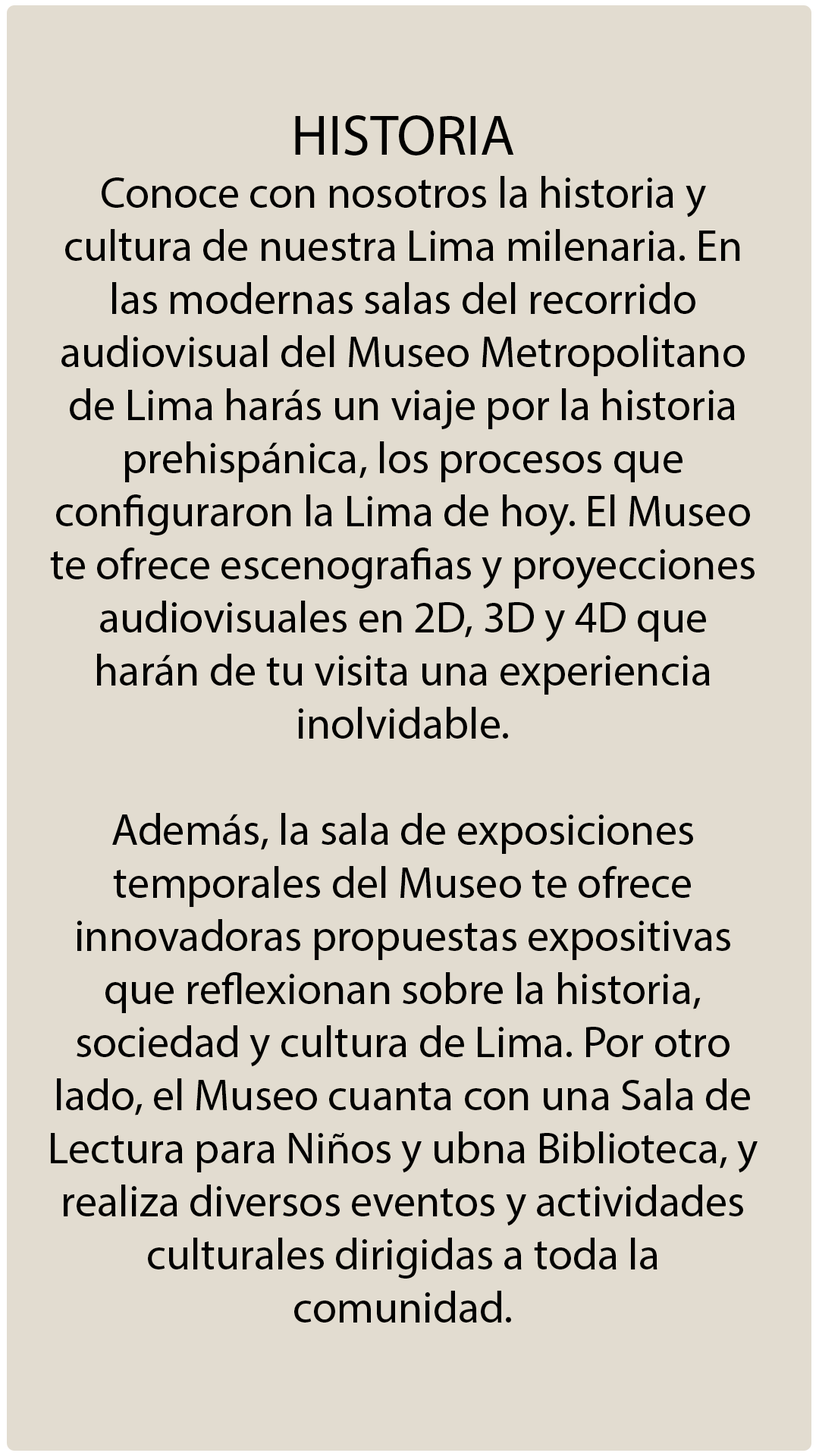
<style>
.page{position:relative;width:819px;height:1456px;background:#e2dcd0}
.page>*{position:absolute;margin:0}
.t1{font:44.2px "MyriadPro-Regular";color:#000000}
.t2{font:56.9px "MyriadPro-Regular";color:#000000}
</style>
<div class="page">
<p class="t1" style="left:50px;top:115px;width:708px;height:1208px;text-align:center"><span class="t2"><br>HISTORIA<br></span>Conoce con nosotros la historia y cultura de nuestra Lima milenaria. En las modernas salas del recorrido audiovisual del Museo Metropolitano de Lima harás un viaje por la historia prehispánica, los procesos que configuraron la Lima de hoy. El Museo te ofrece escenografias y proyecciones audiovisuales en 2D, 3D y 4D que harán de tu visita una experiencia inolvidable.<br><br>Además, la sala de exposiciones temporales del Museo te ofrece innovadoras propuestas expositivas que reflexionan sobre la historia, sociedad y cultura de Lima. Por otro lado, el Museo cuanta con una Sala de Lectura para Niños y ubna Biblioteca, y realiza diversos eventos y actividades culturales dirigidas a toda la comunidad.</p>
</div>
